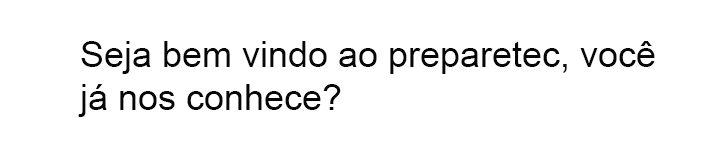
<style>
.page{position:relative;width:724px;height:151px;background:#ffffff}
.page>*{position:absolute;margin:0}
.t1{font:36.1px "ArialMT";color:#070606}
</style>
<div class="page">
<p class="t1" style="left:78px;top:41px;width:577px;height:76px">Seja bem vindo ao preparetec, você<br>já nos conhece?</p>
</div>
